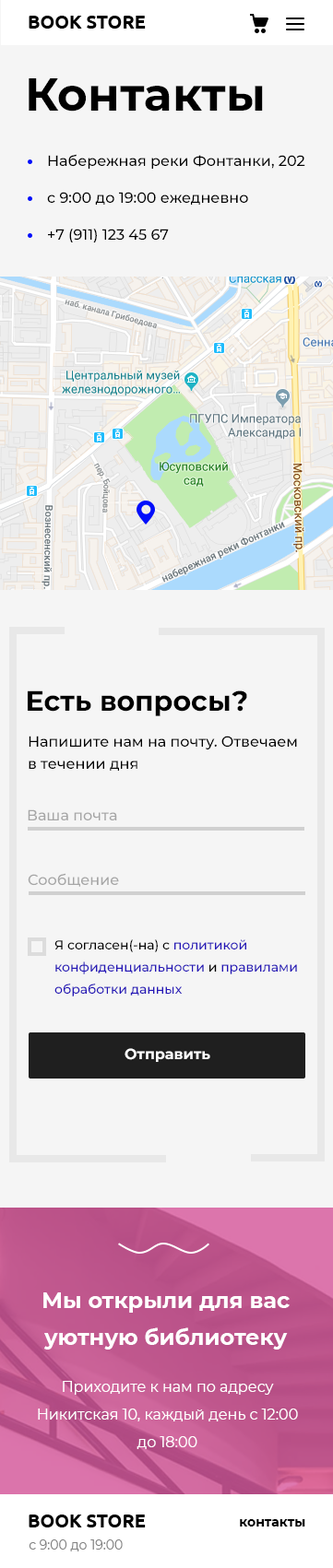
<style>
.page{position:relative;width:333px;height:1568px;background:#f5f5f5}
.page>*{position:absolute;margin:0}
.t1{font:46.1px "Montserrat-Bold";color:#000000}
.t2{font:14.7px "Montserrat-Medium";color:#000000}
.t3{font:27.7px "Montserrat-Bold";color:#000000}
.t4{font:14.7px/22.1px "Montserrat-Medium";color:#000000}
.t5{font:14.7px "Montserrat-Medium";color:#a6a6a6}
.t6{font:12.9px/22.1px "Montserrat-Medium";color:#2516b7}
.t7{font:12.9px/22.1px "Montserrat-Medium";color:#000000}
.t8{font:14.7px "Montserrat-Bold";color:#ffffff}
.t9{font:22.1px/36.9px "Montserrat-Bold";color:#ffffff}
.t10{font:14.7px/27.7px "Montserrat-Regular";color:#ffffff}
.t11{font:12.9px "Montserrat-Bold";color:#000000}
.t12{font:12.9px "Montserrat-Regular";color:#828282}
</style>
<div class="page">
<p class="t1" style="left:29px;top:78px;width:234px;height:34px">Контакты</p>
<p class="t2" style="left:48px;top:154px;width:257px;height:15px">Набережная реки Фонтанки, 202</p>
<p class="t2" style="left:47px;top:192px;width:201px;height:13px">c 9:00 до 19:00 ежедневно</p>
<p class="t2" style="left:48px;top:229px;width:121px;height:13px">+7 (911) 123 45 67</p>
<p class="t3" style="left:28px;top:690px;width:219px;height:26px">Есть вопросы?</p>
<p class="t4" style="left:29px;top:736px;width:268px;height:35px">Напишите нам на почту. Отвечаем в течении дня</p>
<p class="t5" style="left:28px;top:809px;width:89px;height:11px">Ваша почта</p>
<p class="t5" style="left:28px;top:873px;width:91px;height:14px">Сообщение</p>
<p class="t6" style="left:54px;top:939px;width:243px;height:57px"><span class="t7">Я согласен(-на) с </span>политикой конфиденциальности <span class="t7">и </span>правилами обработки данных</p>
<p class="t8" style="left:124px;top:1048px;width:86px;height:14px">Отправить</p>
<p class="t9" style="left:43px;top:1292px;width:246px;height:58px;text-align:center">Мы открыли для вас уютную библиотеку</p>
<p class="t10" style="left:38px;top:1381px;width:260px;height:68px;text-align:center">Приходите к нам по адресу Никитская 10, каждый день с 12:00 до 18:00</p>
<p class="t11" style="left:240px;top:1519px;width:65px;height:8px">контакты</p>
<p class="t12" style="left:29px;top:1539px;width:94px;height:12px">с 9:00 до 19:00</p>
</div>
